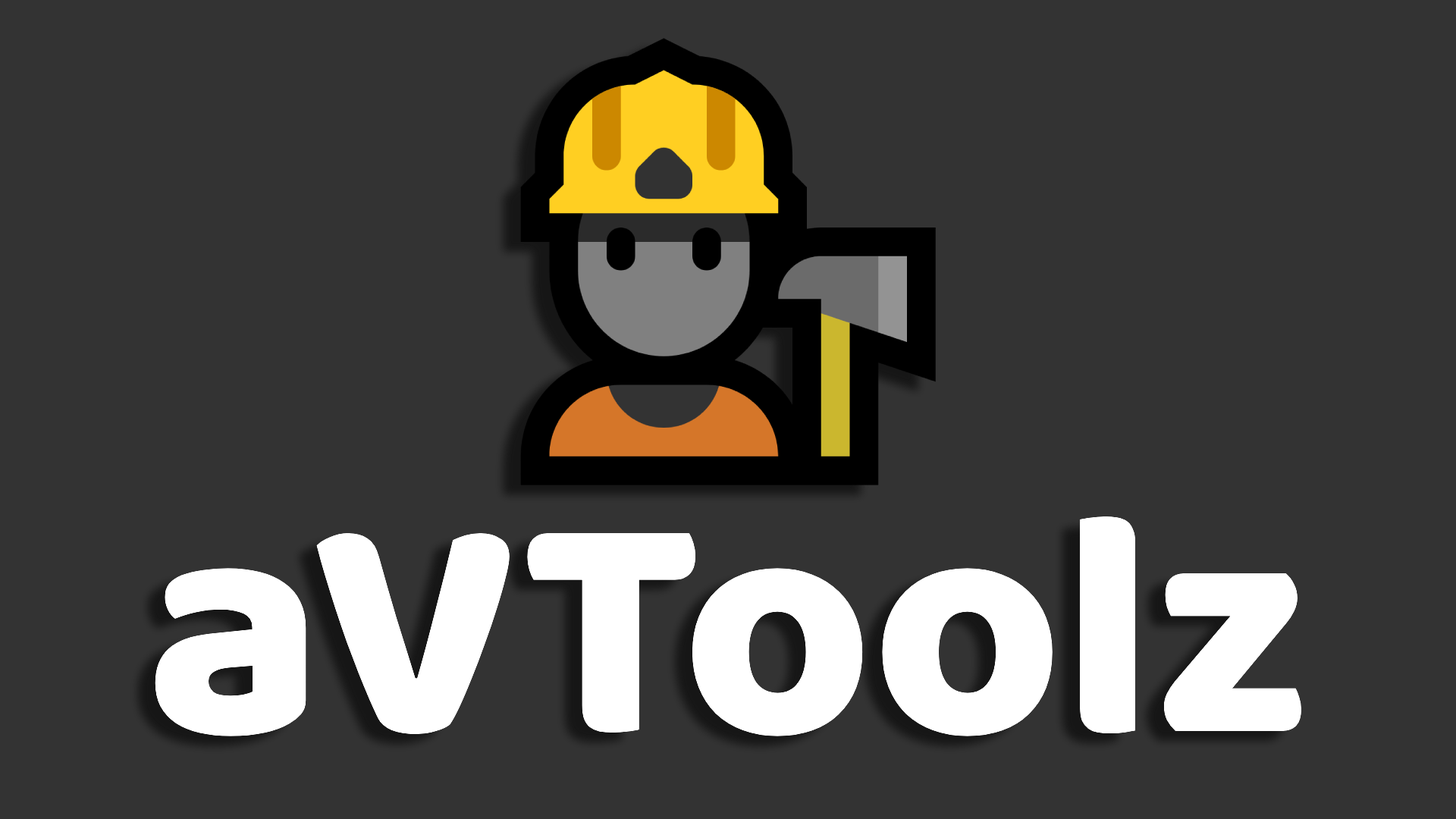
<style>
.page{position:relative;width:1456px;height:819px;background:#333333}
.page>*{position:absolute;margin:0}
.t1{font:324.1px "Baloo";color:#ffffff}
</style>
<div class="page">
<p class="t1" style="left:155px;top:516px;width:1146px;height:220px">aVToolz</p>
</div>
